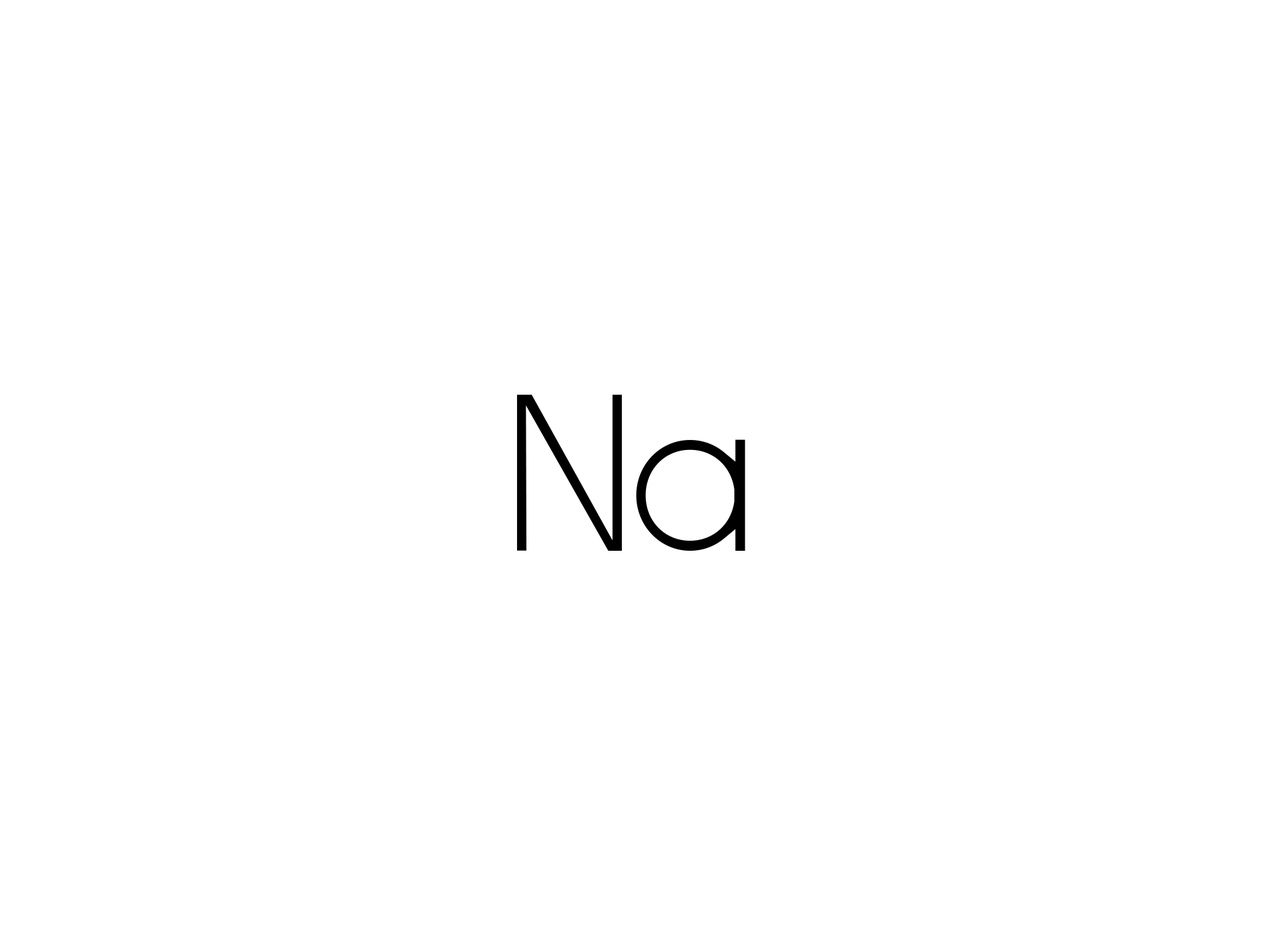
<style>
.page{position:relative;width:1261px;height:946px;background:#ffffff}
.page>*{position:absolute;margin:0}
.t1{font:222.4px "Alcubierre";color:#000000}
</style>
<div class="page">
<p class="t1" style="left:516px;top:394px;width:229px;height:156px">Na</p>
</div>
